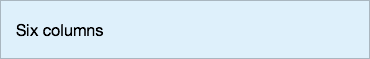
<style>
.page{position:relative;width:370px;height:59px;background:#def0fb}
.page>*{position:absolute;margin:0}
.t1{font:12px "MyriadPro-Regular";color:#000000}
</style>
<div class="page">
<p class="t1" style="left:16px;top:23px;width:88px;height:14px">Six columns</p>
</div>
